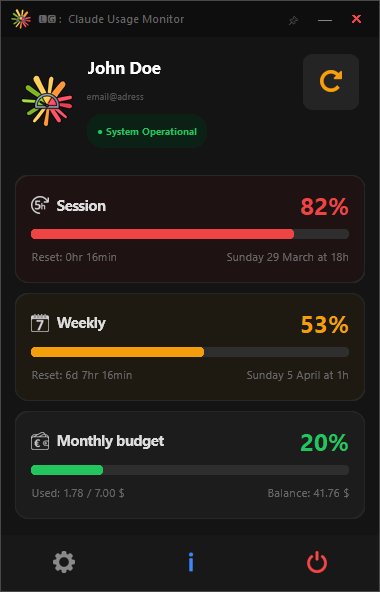
<style>
.page{position:relative;width:380px;height:592px;background:#141414}
.page>*{position:absolute;margin:0}
.t1{font:17px "SegoeUI-Bold";letter-spacing:-0.015em;color:#ffffff}
.t2{font:8.9px "SegoeUI";letter-spacing:0.015em;color:#525252}
.t3{font:14.7px "SegoeUI-Bold";letter-spacing:-0.026em;color:#dddddd}
.t4{font:11.2px "SegoeUI";letter-spacing:0.02em;color:#686868}
.t5{font:11.2px "SegoeUI";letter-spacing:0.015em;color:#686868}
.t6{font:11.2px "SegoeUI";letter-spacing:0.03em;color:#686868}
</style>
<div class="page">
<p class="t1" style="left:88px;top:61px;width:73px;height:13px">John Doe</p>
<p class="t2" style="left:87px;top:93px;width:57px;height:8px">email@adress</p>
<p class="t3" style="left:57px;top:200px;width:49px;height:11px">Session</p>
<p class="t4" style="left:32px;top:253px;width:84px;height:8px">Reset: 0hr 16min</p>
<p class="t5" style="left:227px;top:253px;width:121px;height:10px">Sunday 29 March at 18h</p>
<p class="t3" style="left:57px;top:317px;width:49px;height:14px">Weekly</p>
<p class="t5" style="left:32px;top:371px;width:100px;height:8px">Reset: 6d 7hr 16min</p>
<p class="t5" style="left:247px;top:371px;width:101px;height:10px">Sunday 5 April at 1h</p>
<p class="t3" style="left:57px;top:435px;width:107px;height:14px">Monthly budget</p>
<p class="t4" style="left:32px;top:488px;width:92px;height:10px">Used: 1.78 / 7.00 $</p>
<p class="t6" style="left:268px;top:488px;width:81px;height:10px">Balance: 41.76 $</p>
</div>
